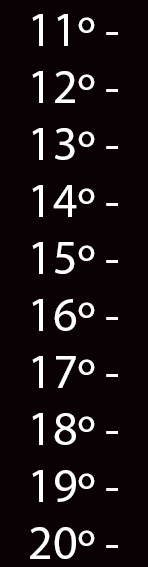
<style>
.page{position:relative;width:148px;height:567px;background:#0a0104}
.page>*{position:absolute;margin:0}
.t1{font:48px "MyriadPro-Regular";color:#ffffff}
</style>
<div class="page">
<p class="t1" style="left:32px;top:14px;width:86px;height:32px">11º -</p>
<p class="t1" style="left:32px;top:71px;width:86px;height:32px">12º -</p>
<p class="t1" style="left:32px;top:128px;width:86px;height:32px">13º -</p>
<p class="t1" style="left:32px;top:185px;width:86px;height:32px">14º -</p>
<p class="t1" style="left:32px;top:242px;width:86px;height:32px">15º -</p>
<p class="t1" style="left:32px;top:299px;width:86px;height:32px">16º -</p>
<p class="t1" style="left:32px;top:356px;width:86px;height:32px">17º -</p>
<p class="t1" style="left:32px;top:413px;width:86px;height:32px">18º -</p>
<p class="t1" style="left:32px;top:470px;width:86px;height:32px">19º -</p>
<p class="t1" style="left:30px;top:527px;width:88px;height:32px">20º -</p>
</div>
